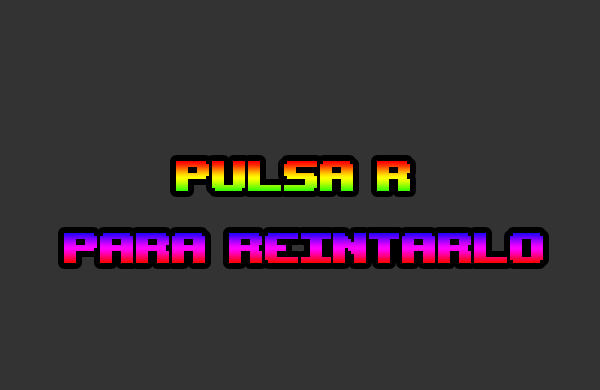
<style>
.page{position:relative;width:600px;height:390px;background:#333333}
.page>*{position:absolute;margin:0}
.t1{font:60px "UpheavalTT-BRK-"}
</style>
<div class="page">
<p class="t1" style="left:64px;top:161px;width:479px;height:102px;text-align:center">PULSA r <br>para reintarlo</p>
</div>
